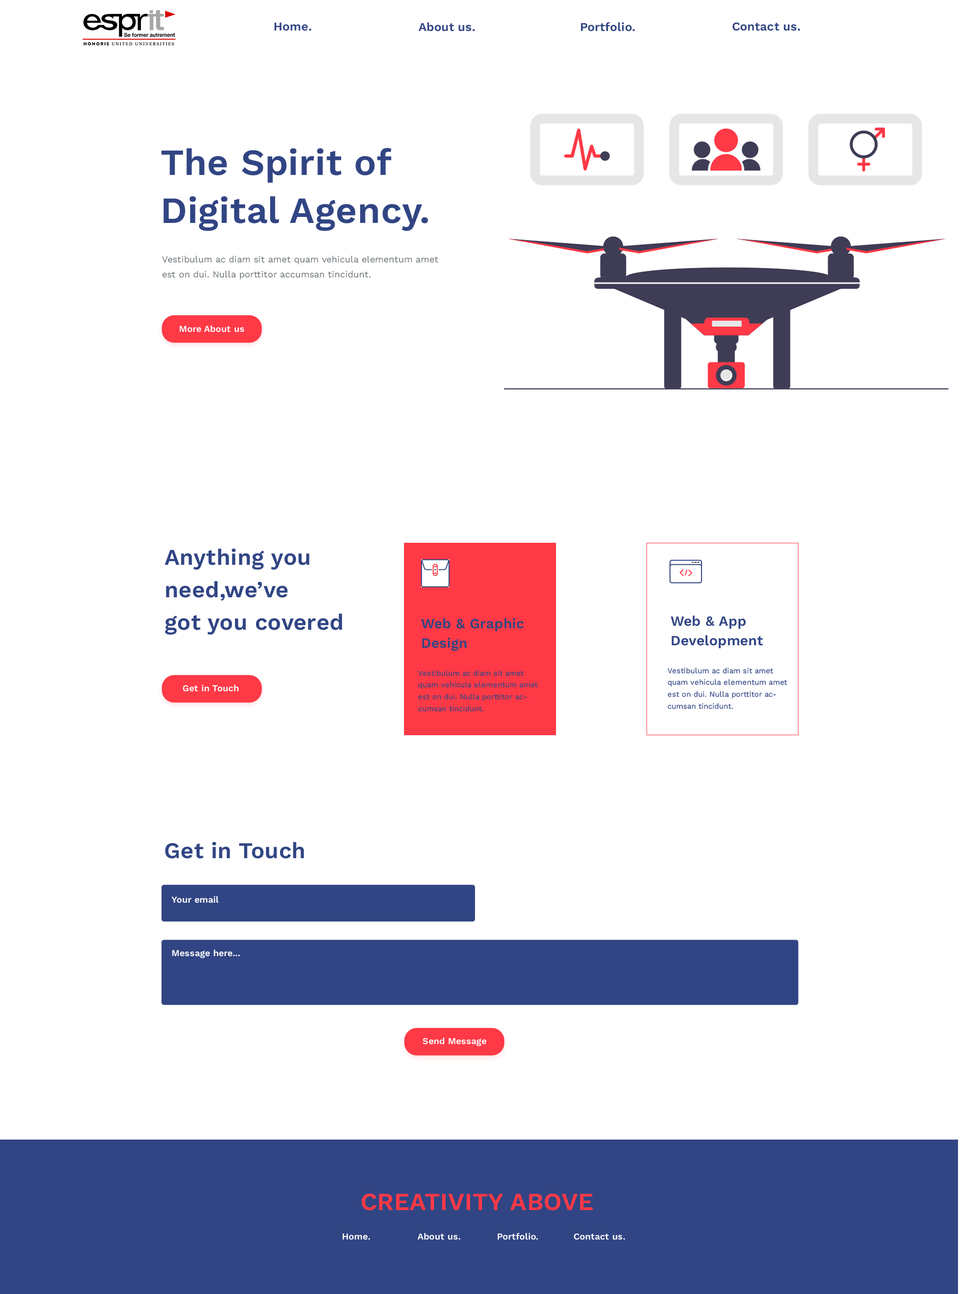
<style>
.page{position:relative;width:960px;height:1294px;background:#ffffff}
.page>*{position:absolute;margin:0}
.t1{font:12px "WorkSans-SemiBold";letter-spacing:0.01em;color:#314584}
.t2{font:37px/47.8px "WorkSans-SemiBold";letter-spacing:0.01em;color:#314584}
.t3{font:9px/15px "WorkSans-Regular";letter-spacing:0.01em;color:#6e757a}
.t4{font:9px "WorkSans-SemiBold";letter-spacing:0.01em;color:#ffffff}
.t5{font:22.5px/32.5px "WorkSans-SemiBold";letter-spacing:0.01em;color:#314584}
.t6{font:14px/19.6px "WorkSans-SemiBold";letter-spacing:0.01em;color:#314584}
.t7{font:7.5px/11.8px "WorkSans-Regular";letter-spacing:0.01em;color:#314584}
.t8{font:22.5px "WorkSans-SemiBold";letter-spacing:0.01em;color:#314584}
.t9{font:24.5px "WorkSans-SemiBold";letter-spacing:0.01em;color:#ff3946}
</style>
<div class="page">
<p class="t1" style="left:274px;top:22px;width:38px;height:9px">Home.</p>
<p class="t1" style="left:418px;top:22px;width:57px;height:10px">About us.</p>
<p class="t1" style="left:581px;top:22px;width:54px;height:10px">Portfolio.</p>
<p class="t1" style="left:732px;top:22px;width:68px;height:9px">Contact us.</p>
<p class="t2" style="left:162px;top:148px;width:266px;height:83px">The Spirit of <br>Digital Agency.</p>
<p class="t3" style="left:162px;top:256px;width:276px;height:24px">Vestibulum ac diam sit amet quam vehicula elementum amet est on dui. Nulla porttitor accumsan tincidunt.</p>
<p class="t4" style="left:180px;top:326px;width:64px;height:6px">More About us</p>
<p class="t5" style="left:164px;top:548px;width:178px;height:87px">Anything you <br>need,we’ve <br>got you covered</p>
<p class="t6" style="left:670px;top:616px;width:93px;height:32px">Web &amp; App<br>Development</p>
<p class="t6" style="left:421px;top:618px;width:103px;height:33px">Web &amp; Graphic <br>Design</p>
<p class="t7" style="left:418px;top:670px;width:120px;height:42px">Vestibulum ac diam sit amet quam vehicula elementum amet est on dui. Nulla porttitor accumsan tincidunt.</p>
<p class="t7" style="left:668px;top:668px;width:120px;height:42px">Vestibulum ac diam sit amet quam vehicula elementum amet est on dui. Nulla porttitor accumsan tincidunt.</p>
<p class="t4" style="left:183px;top:685px;width:55px;height:7px">Get in Touch</p>
<p class="t8" style="left:165px;top:842px;width:139px;height:17px">Get in Touch</p>
<p class="t4" style="left:172px;top:896px;width:47px;height:8px">Your email</p>
<p class="t4" style="left:172px;top:950px;width:68px;height:8px">Message here...</p>
<p class="t4" style="left:422px;top:1038px;width:64px;height:8px">Send Message</p>
<p class="t9" style="left:362px;top:1194px;width:231px;height:17px">CREATIVITY ABOVE</p>
<p class="t4" style="left:342px;top:1234px;width:28px;height:6px">Home.</p>
<p class="t4" style="left:418px;top:1234px;width:42px;height:6px">About us.</p>
<p class="t4" style="left:498px;top:1234px;width:40px;height:6px">Portfolio.</p>
<p class="t4" style="left:574px;top:1234px;width:51px;height:6px">Contact us.</p>
</div>
